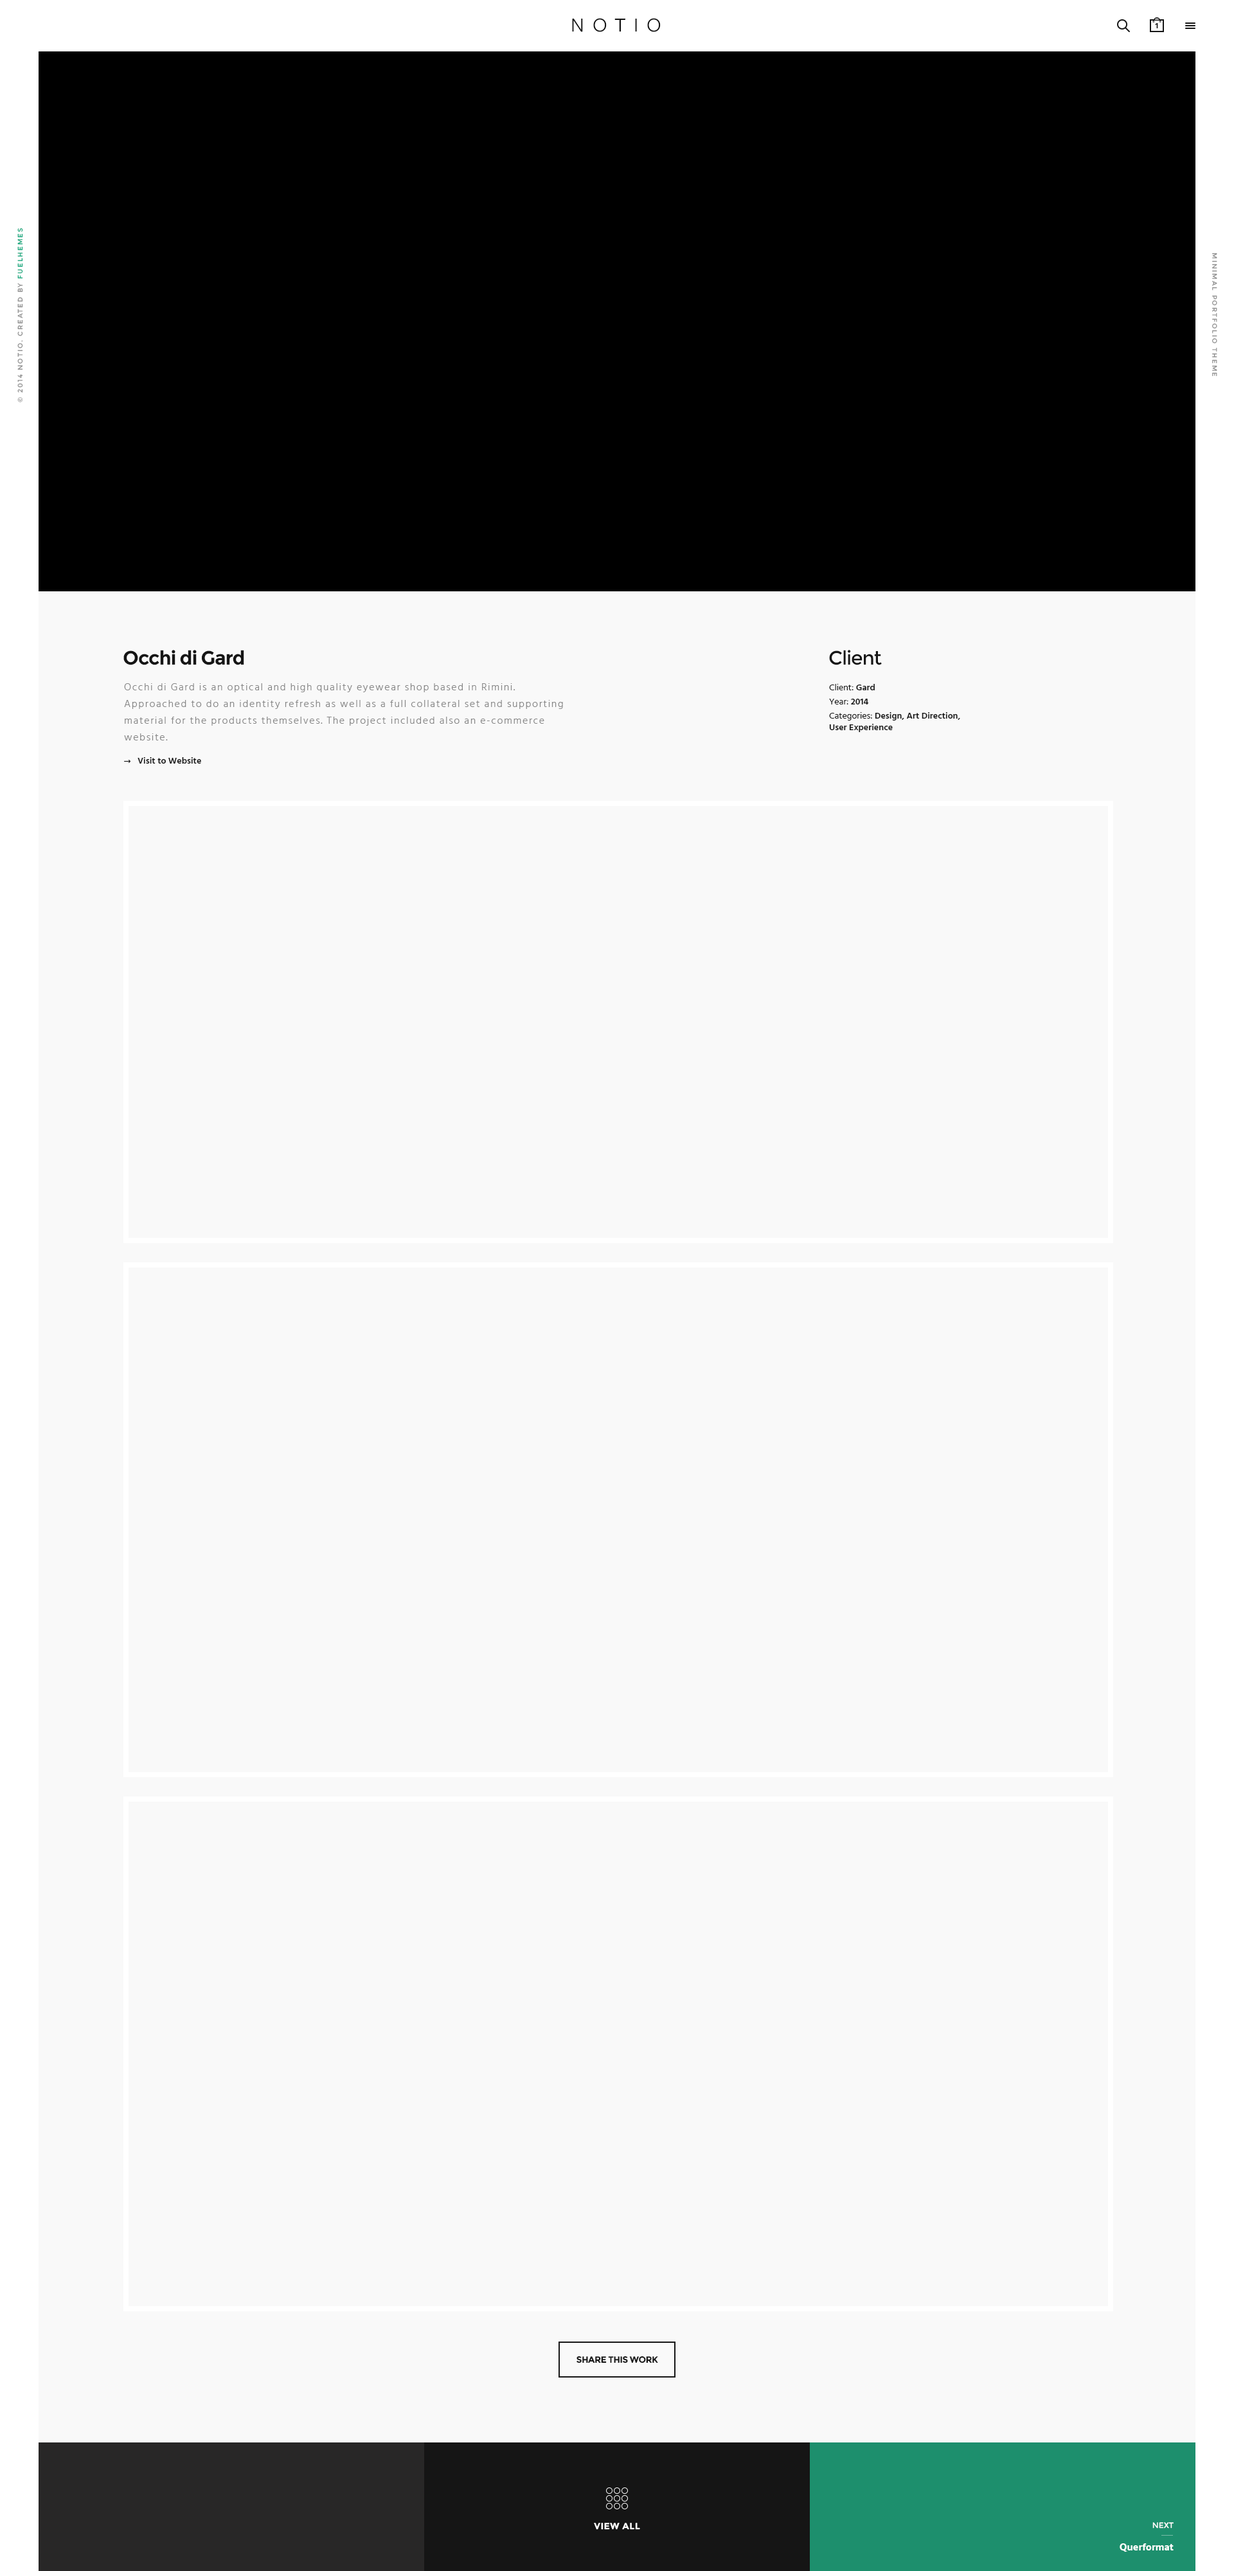
<style>
.page{position:relative;width:1234px;height:2571px;background:#f9f9f9}
.page>*{position:absolute;margin:0}
.t1{font:20.6px "FreightSansProBook-Regular";letter-spacing:0.4em;color:#121212}
.t2{font:7.7px "Hind-Bold";letter-spacing:0.2em;color:#151515;text-transform:uppercase}
.t3{font:6.6px "Montserrat-Regular";letter-spacing:0.2em;color:#909090;text-transform:uppercase}
.t4{font:6.6px "Montserrat-Regular";letter-spacing:0.2em;color:#1aa97f;text-transform:uppercase}
.t5{font:6.5px "Montserrat-Regular";letter-spacing:0.2em;color:#909090}
.t6{font:19.3px "Montserrat-Bold";letter-spacing:-0.04em;color:#151515}
.t7{font:19.3px "Montserrat-Regular";letter-spacing:-0.04em;color:#151515}
.t8{font:10.3px/16.7px "Hind-Light";letter-spacing:0.1em;color:#868686}
.t9{font:9px/14.1px "Hind-Semibold";color:#151515}
.t10{font:9px/14.1px "Hind-Regular";color:#151515}
.t11{font:9px/11.6px "Hind-Semibold";color:#151515}
.t12{font:9px "Hind-Semibold";color:#151515}
.t13{font:9px "Montserrat-Bold";letter-spacing:-0.04em;color:#151515;text-transform:uppercase}
.t14{font:9px "Montserrat-Bold";letter-spacing:0.04em;color:#ffffff}
.t15{font:7.7px "Montserrat-Regular";color:#ffffff;text-transform:uppercase}
.t16{font:10.3px "Hind-Bold";color:#ffffff}
</style>
<div class="page">
<p class="t1" style="left:572px;top:18px;width:89px;height:14px">NOTIO</p>
<p class="t2" style="left:1155px;top:23px;width:3px;height:5px">1</p>
<p class="t3" style="left:17px;top:228px;width:6px;height:174px;rotate:-90deg">© 2014 NOTIO. Created by <span class="t4">FUELhemes</span></p>
<p class="t5" style="left:1212px;top:253px;width:6px;height:124px;rotate:90deg">MINIMAL PORTFOLIO THEME</p>
<p class="t6" style="left:123px;top:650px;width:121px;height:15px">Occhi di Gard</p>
<p class="t7" style="left:829px;top:650px;width:53px;height:15px">Client</p>
<p class="t8" style="left:124px;top:683px;width:439px;height:58px;text-align:right">Occhi di Gard is an optical and high quality eyewear shop based in Rimini. <br>Approached to do an identity refresh as well as a full collateral set and supporting <br>material for the products themselves. The project included also an e-commerce <br>website.</p>
<p class="t9" style="left:829px;top:684px;width:131px;height:48px;text-align:right"><span class="t10">Client: </span>Gard<br><span class="t10">Year: </span>2014<br><span class="t10">Categories: </span>Design, Art Direction, <br><span class="t11">User Experience</span></p>
<p class="t12" style="left:138px;top:757px;width:63px;height:7px">Visit to Website</p>
<p class="t13" style="left:577px;top:2356px;width:81px;height:8px">SHARE THIS WORK</p>
<p class="t14" style="left:594px;top:2523px;width:46px;height:7px">VIEW ALL</p>
<p class="t15" style="left:1153px;top:2523px;width:21px;height:6px">NeXT</p>
<p class="t16" style="left:1120px;top:2544px;width:54px;height:9px">Querformat</p>
</div>
